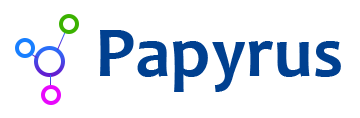
<style>
.page{position:relative;width:360px;height:118px;background:#ffffff}
.page>*{position:absolute;margin:0}
.t1{font:72px "Candara-Bold";color:#004090}
</style>
<div class="page">
<p class="t1" style="left:100px;top:30px;width:241px;height:62px">Papyrus</p>
</div>
